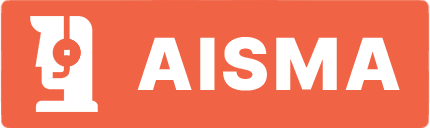
<style>
.page{position:relative;width:430px;height:128px;background:#f06445}
.page>*{position:absolute;margin:0}
.t1{font:72px "Inter-Black";letter-spacing:0.05em;color:#ffffff;text-transform:uppercase}
</style>
<div class="page">
<p class="t1" style="left:137px;top:37px;width:263px;height:54px">aisma</p>
</div>
